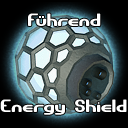
<style>
.page{position:relative;width:128px;height:128px}
.page>*{position:absolute;margin:0}
.t1{font:18px "GravitateBRK";color:#ffffff}
</style>
<div class="page">
<p class="t1" style="left:0px;top:99px;width:127px;height:16px">Energy Shield</p>
</div>
